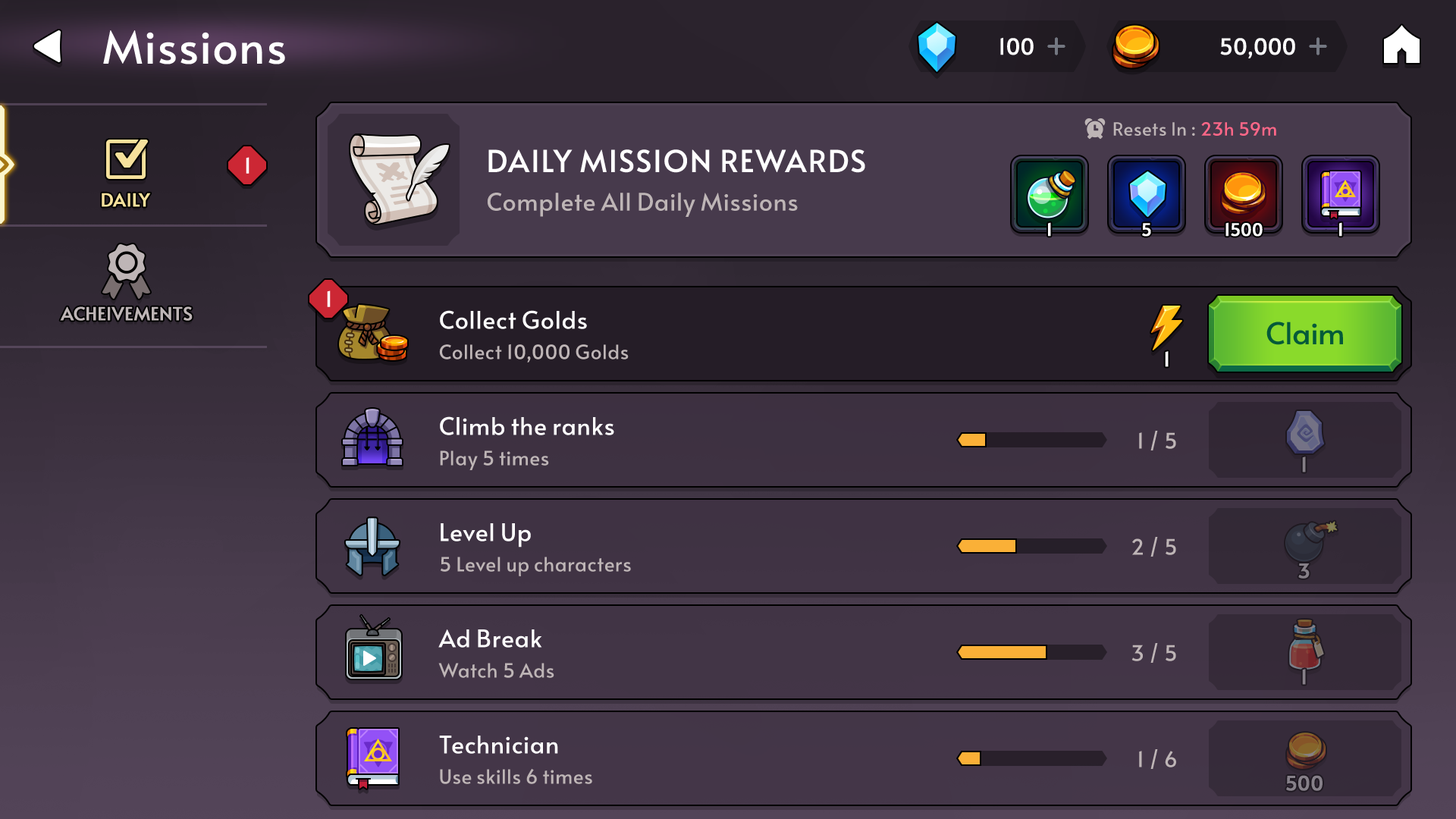
<style>
.page{position:relative;width:1456px;height:819px}
.page>*{position:absolute;margin:0}
.t1{font:45.5px "Alata-Regular";color:#ffffff}
.t2{font:21.9px "Alata-Regular";letter-spacing:-0.025em;color:#ffffff;font-weight:bold}
.t3{font:18.2px "Alata-Regular";letter-spacing:-0.01em;color:#beb5b6}
.t4{font:18.2px "Alata-Regular";letter-spacing:-0.01em;color:#ff6788}
.t5{font:30.3px "Alata-Regular";letter-spacing:-0.01em;color:#ffffff;text-transform:uppercase;font-weight:bold}
.t6{font:21.2px "Alata-Regular";color:#ffffff}
.t7{font:18.2px "Alata-Regular";color:#f6e19c;text-transform:uppercase;font-weight:bold}
.t8{font:24.3px "Alata-Regular";letter-spacing:-0.01em;color:#beb5b6}
.t9{font:17px "Alata-Regular";letter-spacing:0.02em;color:#ffffff;font-weight:bold}
.t10{font:18.2px "Alata-Regular";color:#beb5b6;text-transform:uppercase;font-weight:bold}
.t11{font:24.3px/106.2px "Alata-Regular";letter-spacing:-0.01em;color:#ffffff}
.t12{font:30.3px "Alata-Regular";color:#045a39}
.t13{font:19.7px/106.2px "Alata-Regular";letter-spacing:-0.01em;color:#beb5b6}
.t14{font:19.7px "Alata-Regular";letter-spacing:0.02em;color:#ffffff;font-weight:bold}
.t15{font:21.2px "Alata-Regular";letter-spacing:-0.01em;color:#beb5b6}
.t16{font:19.7px "Alata-Regular";letter-spacing:0.02em;color:#847e86;font-weight:bold}
.t17{font:19.7px "Alata-Regular";letter-spacing:0.02em;color:#857f87;font-weight:bold}
.t18{font:19.7px "Alata-Regular";letter-spacing:0.02em;color:#867f88;font-weight:bold}
.t19{font:19.7px "Alata-Regular";letter-spacing:0.02em;color:#868089;font-weight:bold}
</style>
<div class="page">
<p class="t1" style="left:103px;top:30px;width:182px;height:34px">Missions</p>
<p class="t2" style="left:1000px;top:37px;width:34px;height:18px">100</p>
<p class="t2" style="left:1220px;top:38px;width:75px;height:20px">50,000</p>
<p class="t3" style="left:1113px;top:122px;width:163px;height:14px">Resets In : <span class="t4">23h 59m</span></p>
<p class="t5" style="left:488px;top:149px;width:377px;height:24px">Daily Mission Rewards</p>
<p class="t6" style="left:246px;top:157px;width:3px;height:17px">1</p>
<p class="t7" style="left:102px;top:193px;width:49px;height:14px">Daily</p>
<p class="t8" style="left:487px;top:193px;width:311px;height:24px">Complete All Daily Missions</p>
<p class="t9" style="left:1048px;top:222px;width:3px;height:15px">1</p>
<p class="t9" style="left:1142px;top:223px;width:9px;height:14px">5</p>
<p class="t9" style="left:1225px;top:222px;width:38px;height:15px">1500</p>
<p class="t9" style="left:1339px;top:222px;width:3px;height:15px">1</p>
<p class="t6" style="left:327px;top:290px;width:4px;height:17px">1</p>
<p class="t10" style="left:60px;top:306px;width:133px;height:15px">Acheivements</p>
<p class="t11" style="left:438px;top:310px;width:176px;height:444px">Collect Golds<br>Climb the ranks<br>Level Up<br>Ad Break<br>Technician</p>
<p class="t12" style="left:1266px;top:322px;width:77px;height:23px">Claim</p>
<p class="t13" style="left:438px;top:344px;width:193px;height:440px">Collect 10,000 Golds<br>Play 5 times<br>5 Level up characters<br>Watch 5 Ads<br>Use skills 6 times</p>
<p class="t14" style="left:1165px;top:351px;width:4px;height:16px">1</p>
<p class="t15" style="left:1139px;top:431px;width:37px;height:19px">1 / 5</p>
<p class="t16" style="left:1302px;top:457px;width:4px;height:15px">1</p>
<p class="t15" style="left:1132px;top:537px;width:44px;height:20px">2 / 5</p>
<p class="t17" style="left:1298px;top:563px;width:12px;height:16px">3</p>
<p class="t15" style="left:1131px;top:643px;width:45px;height:20px">3 / 5</p>
<p class="t18" style="left:1302px;top:669px;width:4px;height:16px">1</p>
<p class="t15" style="left:1139px;top:749px;width:37px;height:20px">1 / 6</p>
<p class="t19" style="left:1286px;top:775px;width:37px;height:16px">500</p>
</div>
